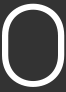
<style>
.page{position:relative;width:66px;height:92px;background:#333333}
.page>*{position:absolute;margin:0}
.t1{font:116px "NexaLight";color:#ffffff}
</style>
<div class="page">
<p class="t1" style="left:2px;top:3px;width:63px;height:84px">0</p>
</div>
